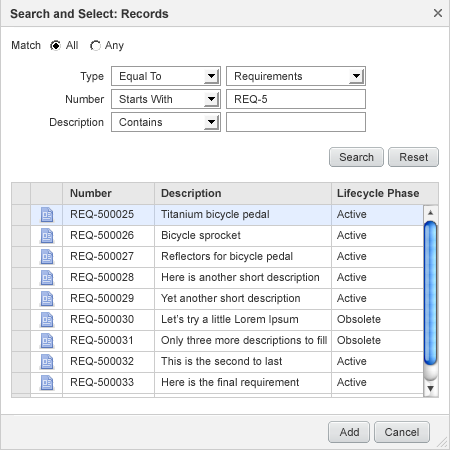
<style>
.page{position:relative;width:450px;height:450px;background:#ffffff}
.page>*{position:absolute;margin:0}
.t1{font:12px "Arial-BoldMT";color:#333333}
.t2{font:11px "ArialMT";color:#333333}
.t3{font:11px/21px "ArialMT";color:#333333}
.t4{font:11px/21px "Arial-BoldMT";color:#333333}
.t5{font:11px "ArialMT";letter-spacing:0.005em;color:#333333}
</style>
<div class="page">
<p class="t1" style="left:10px;top:9px;width:159px;height:10px">Search and Select: Records</p>
<p class="t2" style="left:12px;top:41px;width:29px;height:8px">Match</p>
<p class="t2" style="left:66px;top:41px;width:12px;height:8px">All</p>
<p class="t2" style="left:105px;top:41px;width:19px;height:11px">Any</p>
<p class="t2" style="left:80px;top:72px;width:24px;height:11px">Type</p>
<p class="t2" style="left:120px;top:72px;width:41px;height:11px">Equal To</p>
<p class="t2" style="left:235px;top:72px;width:67px;height:11px">Requirements</p>
<p class="t2" style="left:66px;top:95px;width:39px;height:8px">Number</p>
<p class="t2" style="left:119px;top:95px;width:53px;height:8px">Starts With</p>
<p class="t2" style="left:235px;top:95px;width:32px;height:9px">REQ-5</p>
<p class="t2" style="left:50px;top:118px;width:54px;height:11px">Description</p>
<p class="t2" style="left:119px;top:118px;width:43px;height:8px">Contains</p>
<p class="t2" style="left:339px;top:153px;width:35px;height:8px">Search</p>
<p class="t2" style="left:400px;top:153px;width:28px;height:8px">Reset</p>
<p class="t3" style="left:70px;top:189px;width:64px;height:198px"><span class="t4">Number<br></span>REQ-500025<br>REQ-500026<br>REQ-500027<br>REQ-500028<br>REQ-500029<br>REQ-500030<br>REQ-500031<br>REQ-500032<br>REQ-500033</p>
<p class="t3" style="left:161px;top:189px;width:166px;height:200px"><span class="t4">Description<br></span>Titanium bicycle pedal<br>Bicycle sprocket<br>Reflectors for bicycle pedal<br>Here is another short description<br>Yet another short description<br>Let’s try a little Lorem Ipsum<br>Only three more descriptions to fill<br>This is the second to last<br>Here is the final requirement</p>
<p class="t3" style="left:337px;top:189px;width:82px;height:197px"><span class="t4">Lifecycle Phase<br></span>Active<br>Active<br>Active<br>Active<br>Active<br>Obsolete<br>Obsolete<br>Active<br>Active</p>
<p class="t5" style="left:339px;top:428px;width:20px;height:8px">Add</p>
<p class="t5" style="left:385px;top:428px;width:34px;height:8px">Cancel</p>
</div>
